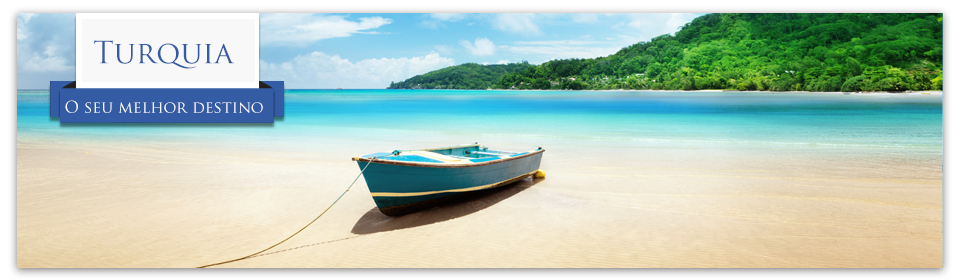
<style>
.page{position:relative;width:960px;height:280px}
.page>*{position:absolute;margin:0}
.t1{font:30px "TrajanPro-Regular";color:#345ca4}
.t2{font:16px "TrajanPro-Regular";color:#f8f8f8}
</style>
<div class="page">
<p class="t1" style="left:93px;top:40px;width:142px;height:29px">Turquia</p>
<p class="t2" style="left:65px;top:100px;width:198px;height:13px">O seu melhor destino</p>
</div>
